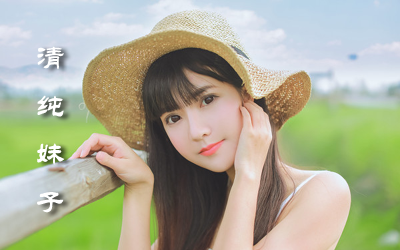
<style>
.page{position:relative;width:400px;height:250px}
.page>*{position:absolute;margin:0}
.t1{font:30px/48px "STLiti";color:#ffffff}
</style>
<div class="page">
<p class="t1" style="left:37px;top:46px;width:28px;height:167px">清<br>纯<br>妹<br>子</p>
</div>
